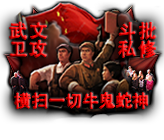
<style>
.page{position:relative;width:164px;height:140px}
.page>*{position:absolute;margin:0}
.t1{font:18.4px/20px "AdobeHeitiStd-Regular"}
.t2{font:16.8px "AdobeHeitiStd-Regular"}
</style>
<div class="page">
<p class="t1" style="left:9px;top:22px;width:38px;height:36px">文攻<br>武卫</p>
<p class="t1" style="left:118px;top:22px;width:38px;height:36px">批修<br>斗私</p>
<p class="t2" style="left:14px;top:92px;width:134px;height:17px">横扫一切牛鬼蛇神</p>
</div>
